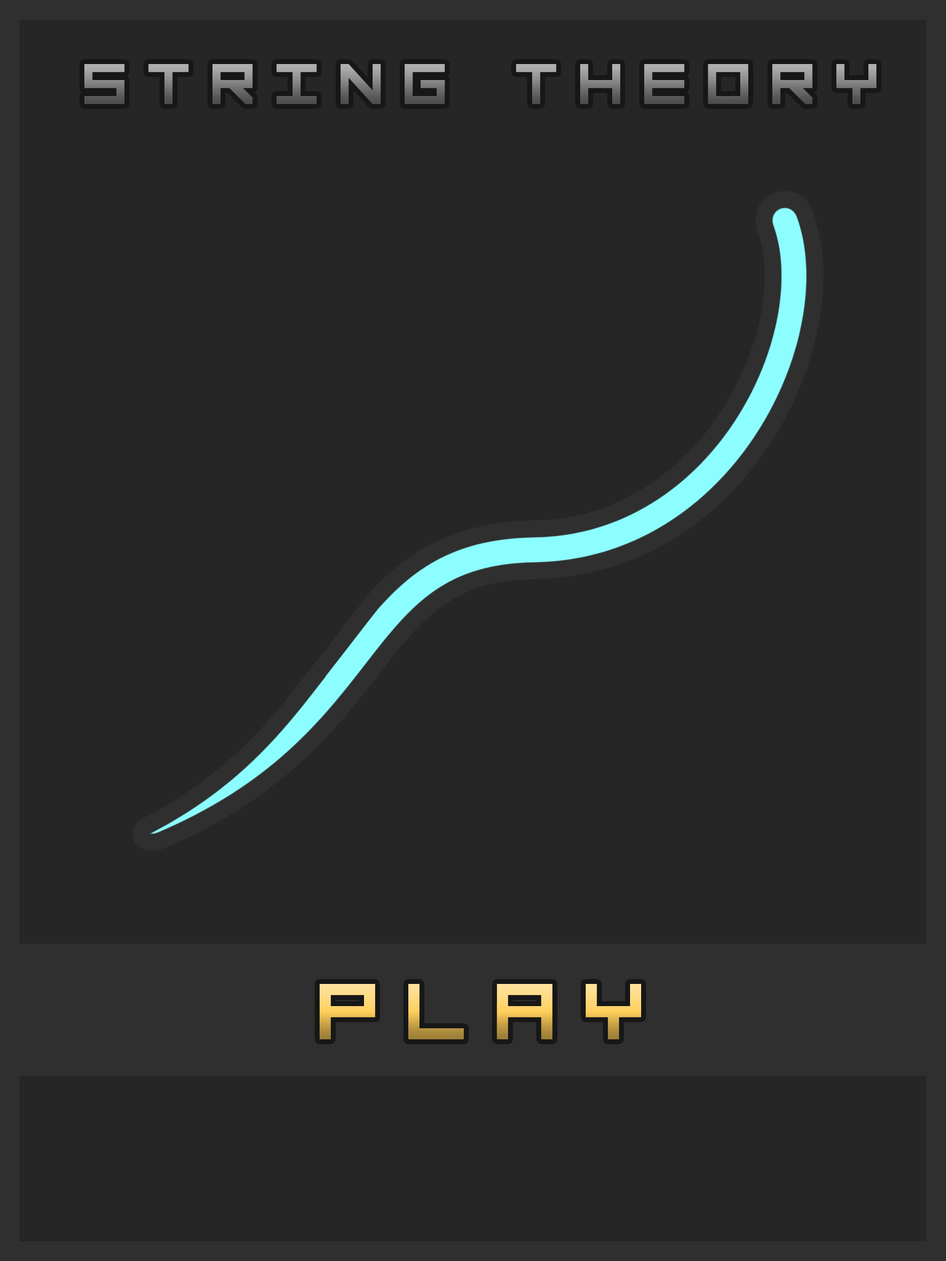
<style>
.page{position:relative;width:946px;height:1261px;background:#262626}
.page>*{position:absolute;margin:0}
.t1{font:80px "Mobius";letter-spacing:0.1em}
</style>
<div class="page">
<p class="t1" style="left:84px;top:64px;width:792px;height:40px">string Theory</p>
</div>
